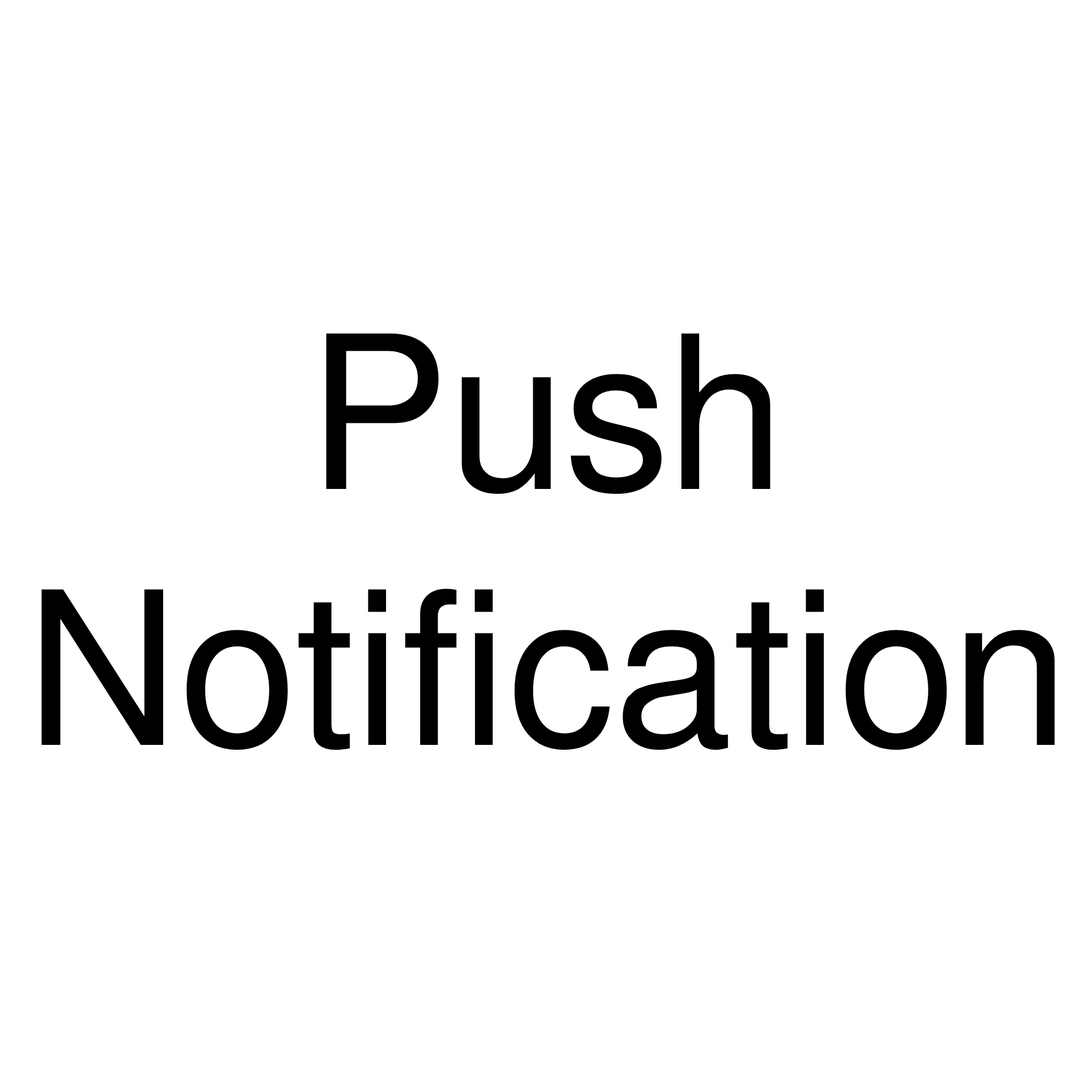
<style>
.page{position:relative;width:1092px;height:1092px;background:#ffffff}
.page>*{position:absolute;margin:0}
.t1{font:213.3px "FreeSans";color:#000000}
</style>
<div class="page">
<p class="t1" style="left:42px;top:333px;width:1013px;height:417px;text-align:center">Push Notification</p>
</div>
